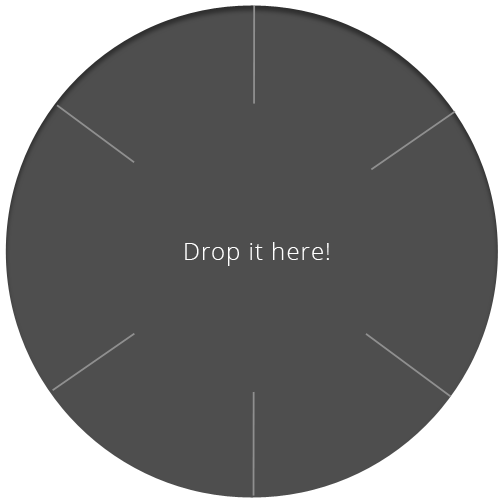
<style>
.page{position:relative;width:503px;height:503px;background:#4e4e4e}
.page>*{position:absolute;margin:0}
.t1{font:24px "OpenSans-Light";letter-spacing:0.04em;color:#ffffff}
</style>
<div class="page">
<p class="t1" style="left:185px;top:242px;width:144px;height:24px">Drop it here!</p>
</div>
